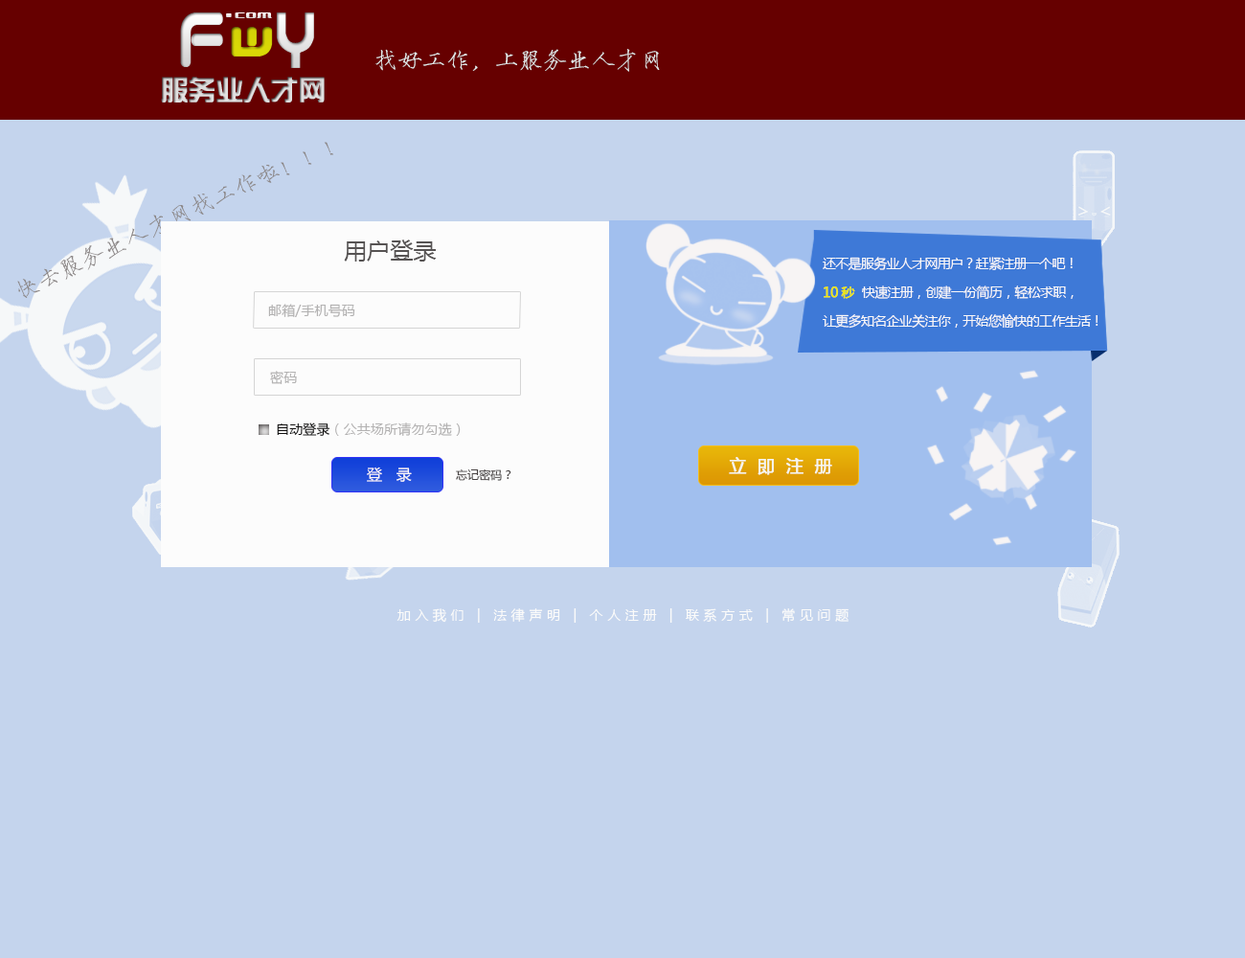
<style>
.page{position:relative;width:1245px;height:958px;background:#c4d4ed}
.page>*{position:absolute;margin:0}
.t1{font:23.9px "HYi3gj";letter-spacing:0.01em;color:#e5ebeb}
.t2{font:26.8px "SingyiEG-Ultra-GB";letter-spacing:0.01em}
.t3{font:23.9px "HYi3gj";letter-spacing:0.01em;color:#8c8787}
.t4{font:23px "MicrosoftYaHei";letter-spacing:0.01em;color:#565353}
.t5{font:13.4px/28.7px "MicrosoftYaHei";letter-spacing:-0.05em;color:#faf8f8}
.t6{font:13.4px/28.7px "MicrosoftYaHei";letter-spacing:-0.05em;color:#f1e90f;font-weight:bold}
.t7{font:13.4px "MicrosoftYaHei";letter-spacing:0.01em;color:#b3b2b2}
.t8{font:13.4px "MicrosoftYaHei";letter-spacing:0.01em;color:#111010}
.t9{font:17.2px "MicrosoftYaHei";letter-spacing:0.63em;color:#f6f6f0;font-weight:bold}
.t10{font:15.3px "MicrosoftYaHei";letter-spacing:0.01em;color:#fdf8f8}
.t11{font:11.5px "MicrosoftYaHei";letter-spacing:0.01em;color:#484343}
.t12{font:13.4px "MicrosoftYaHei";letter-spacing:0.33em;color:#fbfbfa}
</style>
<div class="page">
<p class="t1" style="left:375px;top:49px;width:285px;height:23px">找好工作，上服务业人才网</p>
<p class="t2" style="left:161px;top:77px;width:164px;height:25px">服务业人才网</p>
<p class="t3" style="left:17px;top:142px;width:316px;height:156px;rotate:-25deg">快去服务业人才网找工作啦！！！</p>
<p class="t4" style="left:344px;top:239px;width:93px;height:22px">用户登录</p>
<p class="t5" style="left:823px;top:257px;width:276px;height:72px">还不是服务业人才网用户？赶紧注册一个吧！<br><span class="t6">10 秒  </span>快速注册，创建一份简历，轻松求职，<br>让更多知名企业关注你，开始您愉快的工作生活！</p>
<p class="t7" style="left:268px;top:304px;width:87px;height:13px">邮箱/手机号码</p>
<p class="t7" style="left:270px;top:371px;width:27px;height:13px">密码</p>
<p class="t7" style="left:277px;top:422px;width:184px;height:14px"><span class="t8">自动登录</span>（公共场所请勿勾选）</p>
<p class="t9" style="left:729px;top:457px;width:103px;height:18px">立即注册</p>
<p class="t10" style="left:367px;top:466px;width:45px;height:16px">登   录</p>
<p class="t11" style="left:456px;top:469px;width:55px;height:12px">忘记密码？</p>
<p class="t12" style="left:397px;top:608px;width:452px;height:15px">加入我们 | 法律声明 | 个人注册 | 联系方式 | 常见问题</p>
</div>
